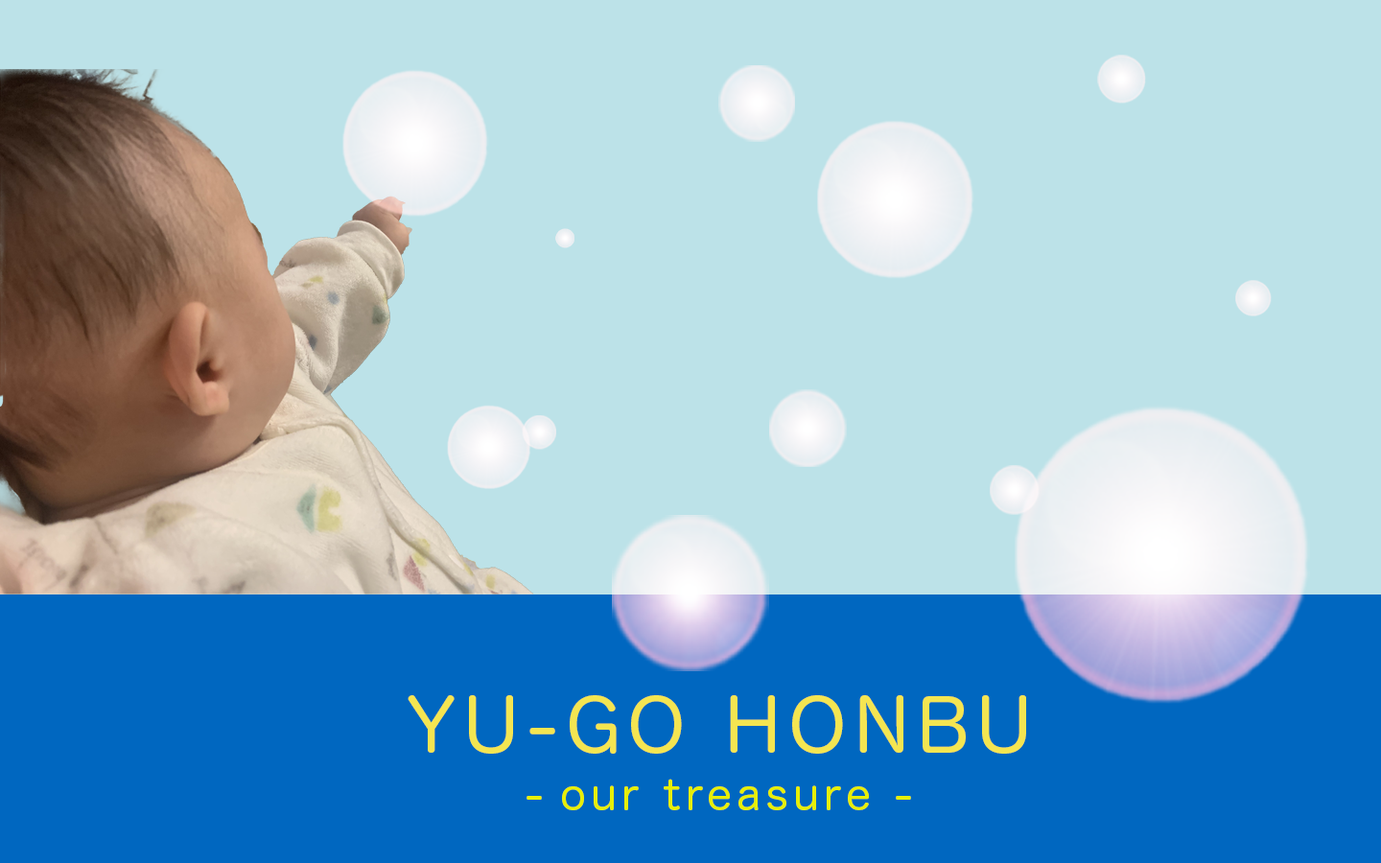
<style>
.page{position:relative;width:1381px;height:863px;background:#bce2e8}
.page>*{position:absolute;margin:0}
.t1{font:71.9px "HiraMaruPro-W4";letter-spacing:0.1em;color:#f4e551}
.t2{font:43.2px "HiraMaruPro-W4";letter-spacing:0.1em;color:#e7ef06}
</style>
<div class="page">
<p class="t1" style="left:408px;top:695px;width:618px;height:59px">YU-GO HONBU</p>
<p class="t2" style="left:527px;top:779px;width:384px;height:32px">our treasure -</p>
</div>
